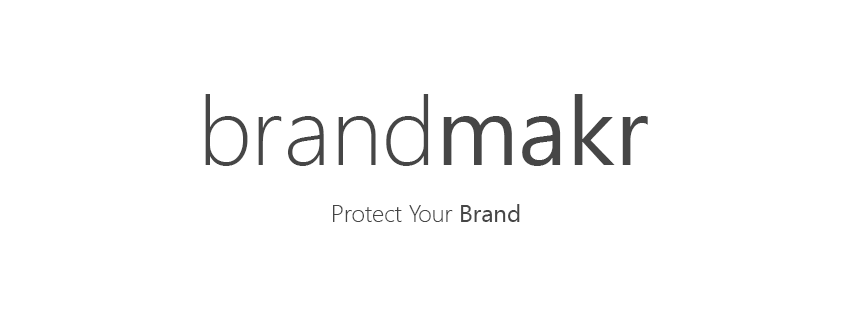
<style>
.page{position:relative;width:851px;height:315px;background:#ffffff}
.page>*{position:absolute;margin:0}
.t1{font:96px "SegoeUI-Light";color:#464646}
.t2{font:96px "SegoeUI";color:#464646}
.t3{font:24px "SegoeUI-Light";color:#464646}
.t4{font:24px "SegoeUI";color:#464646}
</style>
<div class="page">
<p class="t1" style="left:205px;top:94px;width:443px;height:72px">brand<span class="t2">makr</span></p>
<p class="t3" style="left:333px;top:204px;width:187px;height:18px">Protect Your<span class="t4"> Brand</span></p>
</div>
